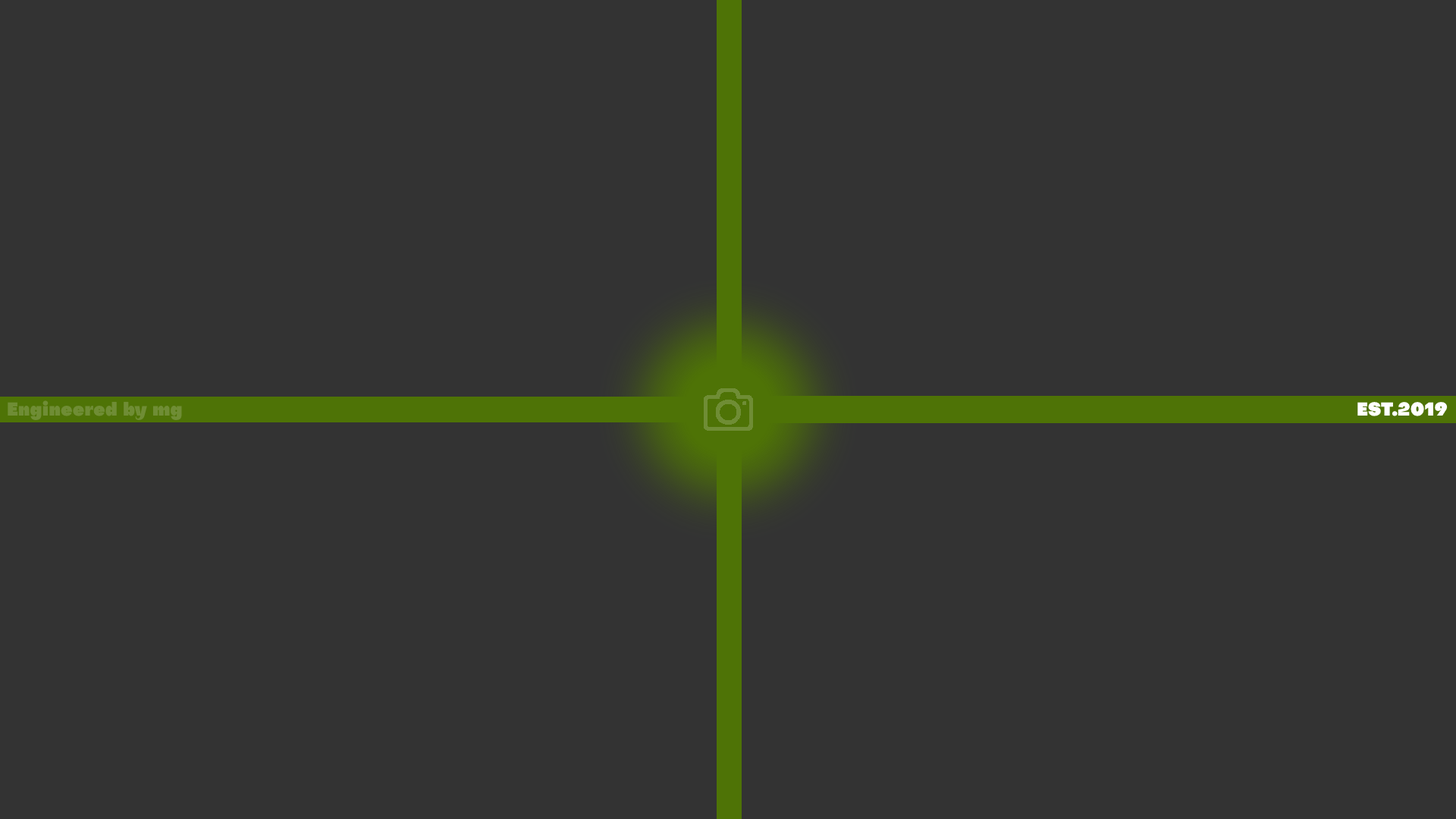
<style>
.page{position:relative;width:1456px;height:819px;background:#333333}
.page>*{position:absolute;margin:0}
.t1{font:18.2px "Subjectivity-Super";color:#6f8d35}
.t2{font:18.2px "Subjectivity-Super";color:#ffffff}
</style>
<div class="page">
<p class="t1" style="left:8px;top:400px;width:174px;height:21px">Engineered by mg</p>
<p class="t2" style="left:1357px;top:402px;width:91px;height:14px">EST.2019</p>
</div>
